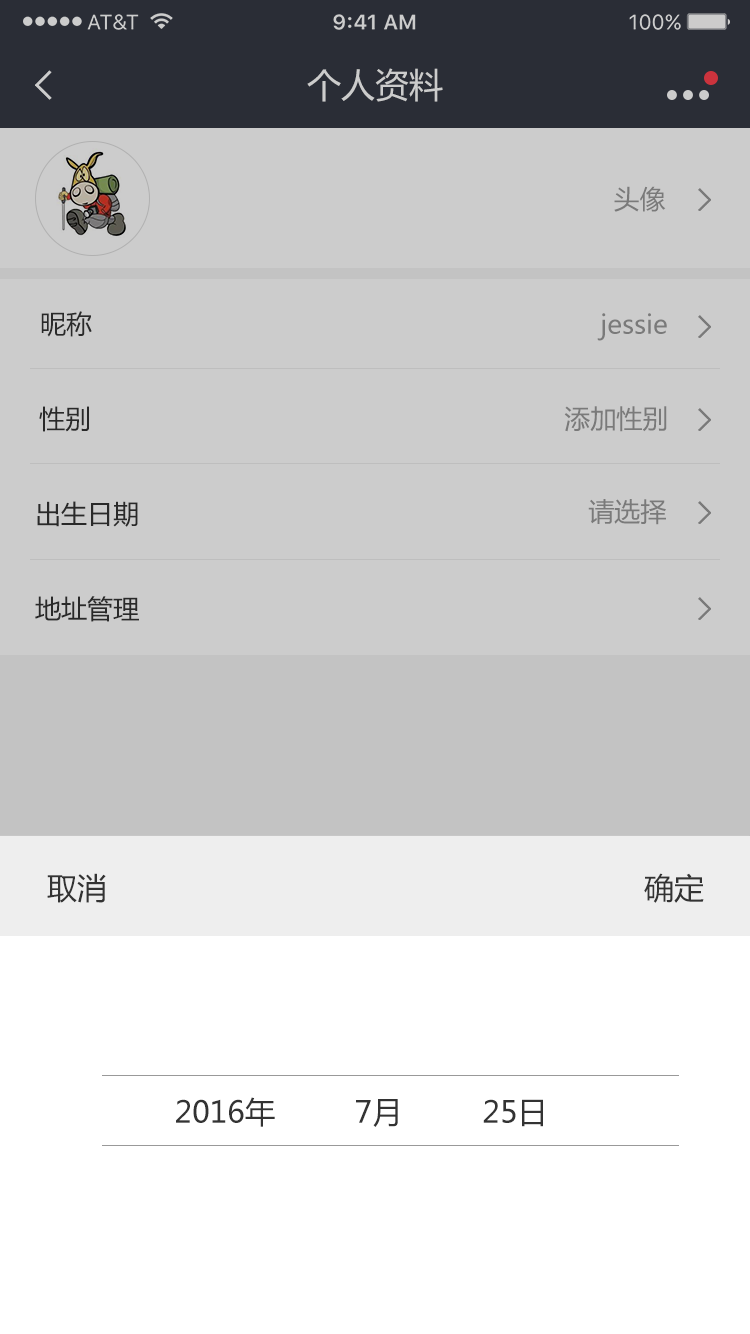
<style>
.page{position:relative;width:750px;height:1334px;background:#cccccc}
.page>*{position:absolute;margin:0}
.t1{font:34px "MicrosoftYaHei";color:#cccccc}
.t2{font:26px "MicrosoftYaHei";color:#7a7a7a}
.t3{font:26px "MicrosoftYaHei";color:#333333}
.t4{font:30px "MicrosoftYaHei";color:#333333}
</style>
<div class="page">
<p class="t1" style="left:307px;top:68px;width:136px;height:34px">个人资料</p>
<p class="t2" style="left:614px;top:186px;width:52px;height:26px">头像</p>
<p class="t3" style="left:41px;top:311px;width:51px;height:26px">昵称</p>
<p class="t2" style="left:597px;top:313px;width:70px;height:28px">jessie</p>
<p class="t3" style="left:39px;top:406px;width:50px;height:26px">性别</p>
<p class="t2" style="left:564px;top:406px;width:103px;height:26px">添加性别</p>
<p class="t3" style="left:37px;top:501px;width:101px;height:26px">出生日期</p>
<p class="t2" style="left:588px;top:499px;width:78px;height:26px">请选择</p>
<p class="t3" style="left:35px;top:596px;width:104px;height:26px">地址管理</p>
<p class="t4" style="left:47px;top:873px;width:59px;height:30px">取消</p>
<p class="t4" style="left:644px;top:873px;width:60px;height:30px">确定</p>
<p class="t4" style="left:176px;top:1097px;width:367px;height:30px">2016年         7月         25日</p>
</div>
